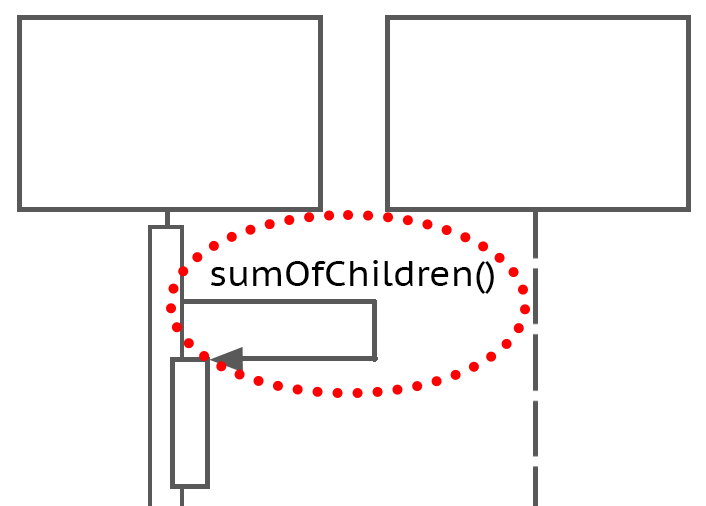
<style>
.page{position:relative;width:706px;height:506px;background:#ffffff}
.page>*{position:absolute;margin:0}
.t1{font:36px "PTSans-Caption";color:#000000}
</style>
<div class="page">
<p class="t1" style="left:211px;top:260px;width:283px;height:34px">sumOfChildren()</p>
</div>
